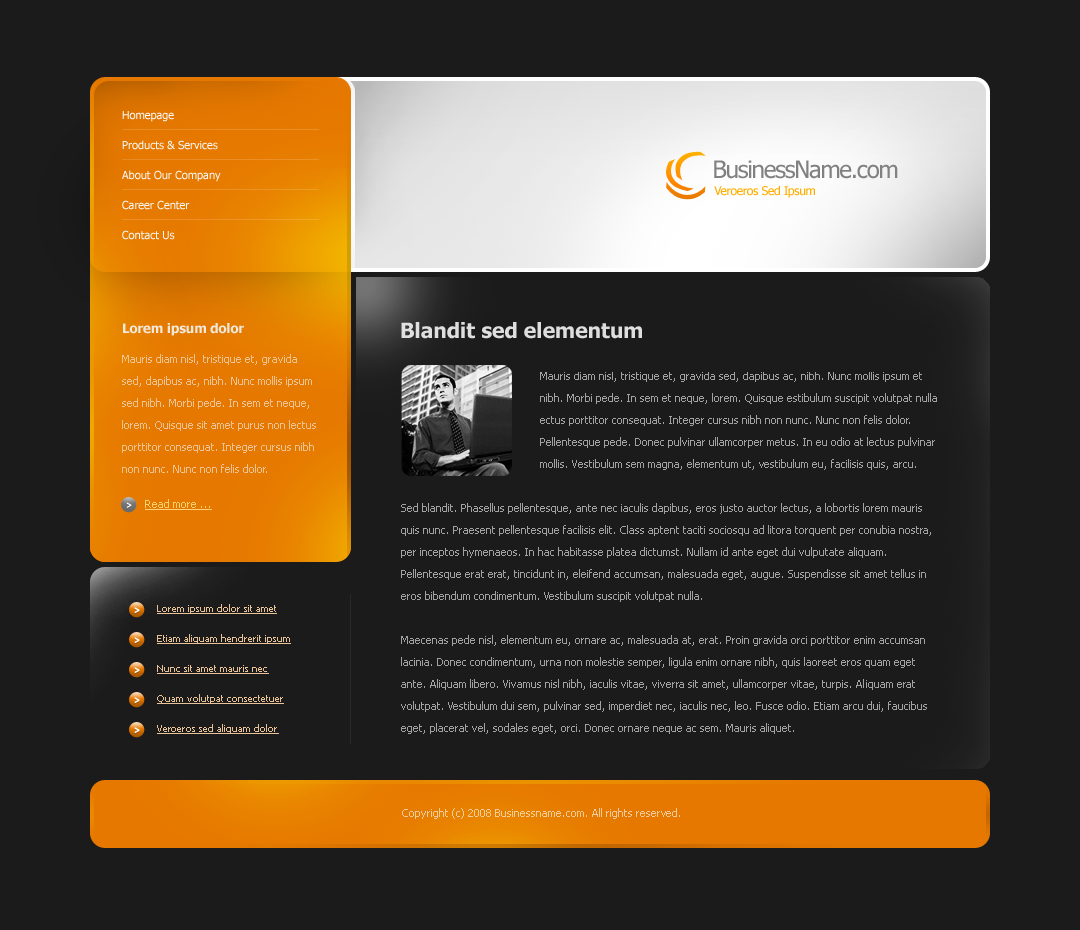
<style>
.page{position:relative;width:1080px;height:930px;background:#1b1b1b}
.page>*{position:absolute;margin:0}
.t1{font:11px/30px "Tahoma";color:#fafafa}
.t2{font:24px "Tahoma";letter-spacing:-0.05em;color:#818181}
.t3{font:12px "Tahoma";letter-spacing:-0.025em;color:#ffae00}
.t4{font:13px "Tahoma-Bold";color:#f3f3f3}
.t5{font:21px "Tahoma-Bold";color:#f3f3f3}
.t6{font:11px/22px "Tahoma";color:#eec292}
.t7{font:11px/22px "Tahoma";color:#a2a2a2}
.t8{font:11px "Tahoma";color:#ffdb80;text-decoration:underline}
.t9{font:10px/30px "Tahoma";color:#e9c397;text-decoration:underline}
.t10{font:11px "Tahoma";color:#f5cb99}
</style>
<div class="page">
<p class="t1" style="left:122px;top:111px;width:99px;height:129px">Homepage<br>Products &amp; Services<br>About Our Company<br>Career Center<br>Contact Us</p>
<p class="t2" style="left:714px;top:160px;width:184px;height:19px">BusinessName.com</p>
<p class="t3" style="left:714px;top:186px;width:101px;height:12px">Veroeros Sed Ipsum</p>
<p class="t4" style="left:123px;top:323px;width:121px;height:13px;opacity:0.9">Lorem ipsum dolor</p>
<p class="t5" style="left:401px;top:322px;width:241px;height:17px;opacity:0.9">Blandit sed elementum</p>
<p class="t6" style="left:122px;top:354px;width:194px;height:119px">Mauris diam nisl, tristique et, gravida sed, dapibus ac, nibh. Nunc mollis ipsum sed nibh. Morbi pede. In sem et neque, lorem. Quisque sit amet purus non lectus porttitor consequat. Integer cursus nibh non nunc. Nunc non felis dolor.</p>
<p class="t7" style="left:401px;top:372px;width:536px;height:362px">Mauris diam nisl, tristique et, gravida sed, dapibus ac, nibh. Nunc mollis ipsum et nibh. Morbi pede. In sem et neque, lorem. Quisque estibulum suscipit volutpat nulla ectus porttitor consequat. Integer cursus nibh non nunc. Nunc non felis dolor. Pellentesque pede. Donec pulvinar ullamcorper metus. In eu odio at lectus pulvinar mollis. Vestibulum sem magna, elementum ut, vestibulum eu, facilisis quis, arcu. <br><br>Sed blandit. Phasellus pellentesque, ante nec iaculis dapibus, eros justo auctor lectus, a lobortis lorem mauris quis nunc. Praesent pellentesque facilisis elit. Class aptent taciti sociosqu ad litora torquent per conubia nostra, per inceptos hymenaeos. In hac habitasse platea dictumst. Nullam id ante eget dui vulputate aliquam. Pellentesque erat erat, tincidunt in, eleifend accumsan, malesuada eget, augue. Suspendisse sit amet tellus in eros bibendum condimentum. Vestibulum suscipit volutpat nulla.<br><br>Maecenas pede nisl, elementum eu, ornare ac, malesuada at, erat. Proin gravida orci porttitor enim accumsan lacinia. Donec condimentum, urna non molestie semper, ligula enim ornare nibh, quis laoreet eros quam eget ante. Aliquam libero. Vivamus nisl nibh, iaculis vitae, viverra sit amet, ullamcorper vitae, turpis. Aliquam erat volutpat. Vestibulum dui sem, pulvinar sed, imperdiet nec, iaculis nec, leo. Fusce odio. Etiam arcu dui, faucibus eget, placerat vel, sodales eget, orci. Donec ornare neque ac sem. Mauris aliquet.</p>
<p class="t8" style="left:145px;top:499px;width:67px;height:11px;opacity:0.9">Read more ...</p>
<p class="t9" style="left:157px;top:604px;width:134px;height:130px">Lorem ipsum dolor sit amet<br>Etiam aliquam hendrerit ipsum<br>Nunc sit amet mauris nec<br>Quam volutpat consectetuer<br>Veroeros sed aliquam dolor</p>
<p class="t10" style="left:402px;top:808px;width:278px;height:11px">Copyright (c) 2008 Businessname.com. All rights reserved.</p>
</div>
